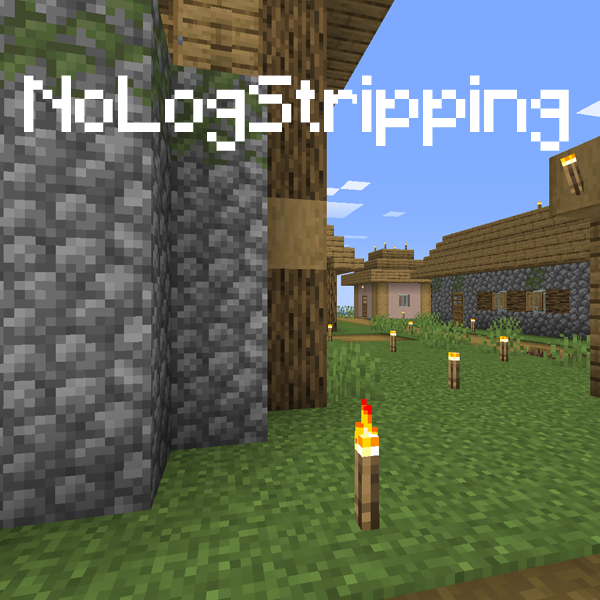
<style>
.page{position:relative;width:600px;height:600px}
.page>*{position:absolute;margin:0}
.t1{font:75.2px "Minecraft";color:#ffffff}
</style>
<div class="page">
<p class="t1" style="left:24px;top:75px;width:545px;height:76px">NoLogStripping</p>
</div>
